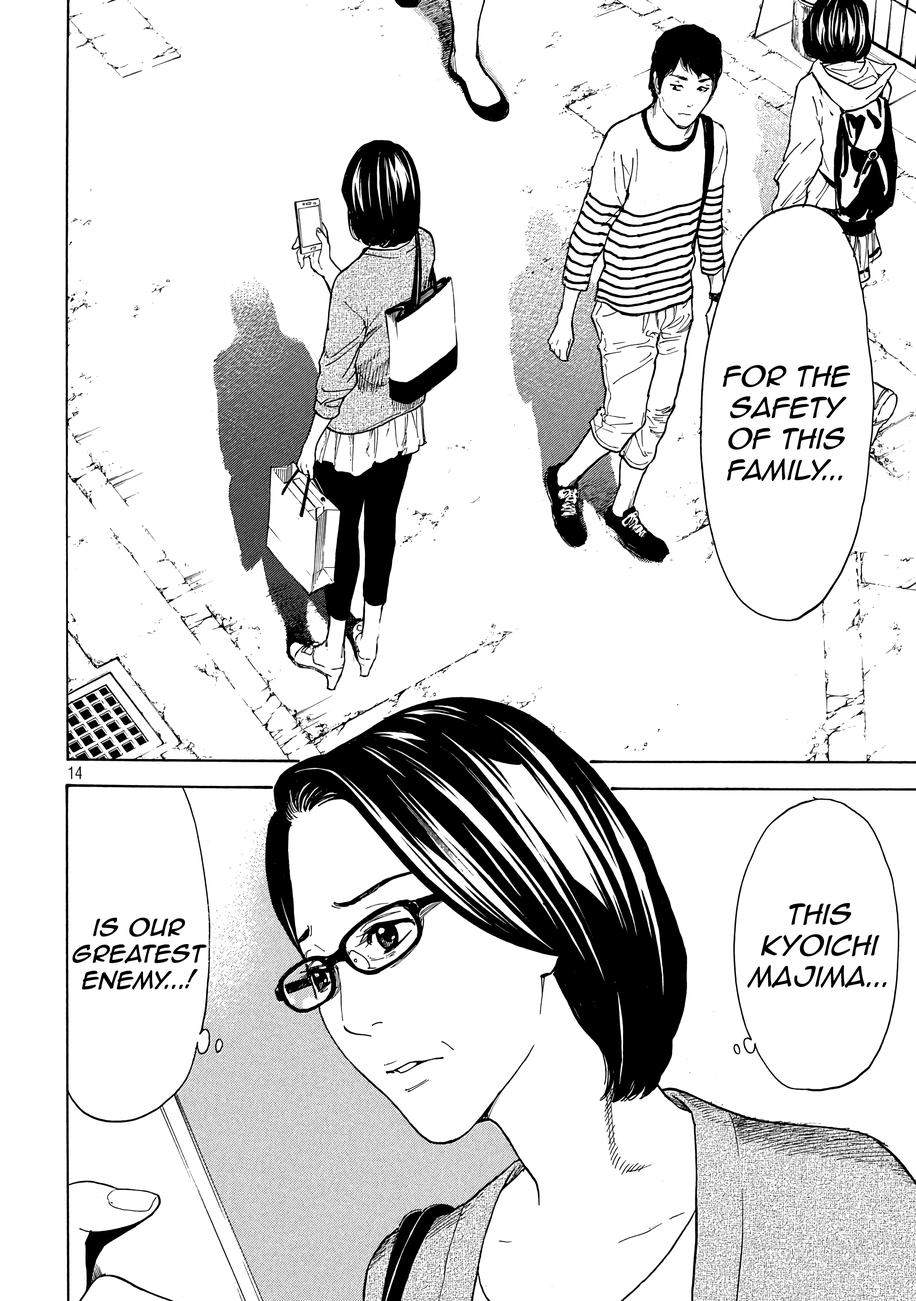
<style>
.page{position:relative;width:916px;height:1301px;background:#ffffff}
.page>*{position:absolute;margin:0}
.t1{font:26px "AnimeAce2.0BB-Italic";color:#000000}
.t2{font:22px "AnimeAce2.0BB-Italic";color:#000000;font-weight:bold}
</style>
<div class="page">
<p class="t1" style="left:723px;top:365px;width:128px;height:116px;text-align:center">For the safety of this family...</p>
<p class="t1" style="left:748px;top:903px;width:139px;height:85px;text-align:center">This Kyoichi Majima...</p>
<p class="t2" style="left:72px;top:918px;width:135px;height:72px;text-align:center">is our greatest enemy...!</p>
</div>
